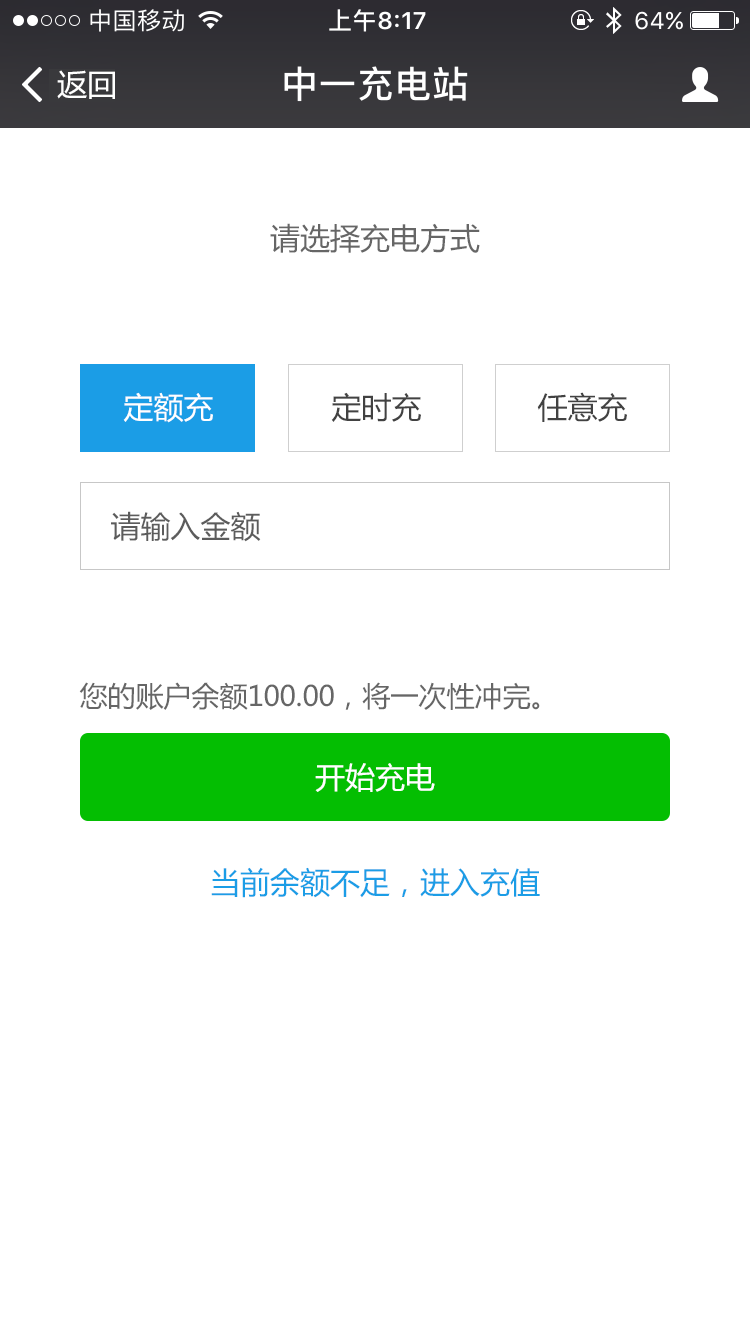
<style>
.page{position:relative;width:750px;height:1334px;background:#ffffff}
.page>*{position:absolute;margin:0}
.t1{font:30px "MicrosoftYaHei";color:#ffffff}
.t2{font:30px "MicrosoftYaHei";color:#666666}
.t3{font:30px "MicrosoftYaHei";color:#424242}
.t4{font:30px "MicrosoftYaHei";color:#5c5c5c}
.t5{font:28px "MicrosoftYaHei";color:#666666}
.t6{font:30px "MicrosoftYaHei";color:#1b9de6}
</style>
<div class="page">
<p class="t1" style="left:57px;top:70px;width:58px;height:29px">返回</p>
<p class="t2" style="left:270px;top:223px;width:210px;height:30px">请选择充电方式</p>
<p class="t1" style="left:123px;top:392px;width:90px;height:31px">定额充</p>
<p class="t3" style="left:331px;top:392px;width:90px;height:30px">定时充</p>
<p class="t3" style="left:537px;top:392px;width:90px;height:30px">任意充</p>
<p class="t4" style="left:111px;top:511px;width:150px;height:31px">请输入金额</p>
<p class="t5" style="left:79px;top:682px;width:461px;height:28px">您的账户余额100.00，将一次性冲完。</p>
<p class="t1" style="left:315px;top:763px;width:120px;height:29px">开始充电</p>
<p class="t6" style="left:211px;top:867px;width:329px;height:31px">当前余额不足，进入充值</p>
</div>
